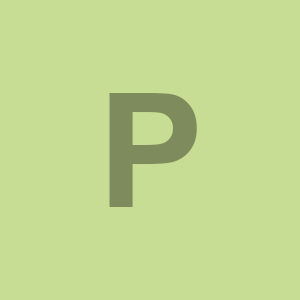
<style>
.page{position:relative;width:300px;height:300px;background:#c7dd93}
.page>*{position:absolute;margin:0}
.t1{font:158.8px "Arial-BoldMT";color:#7e8c5d}
</style>
<div class="page">
<p class="t1" style="left:109px;top:93px;width:88px;height:114px">P</p>
</div>
